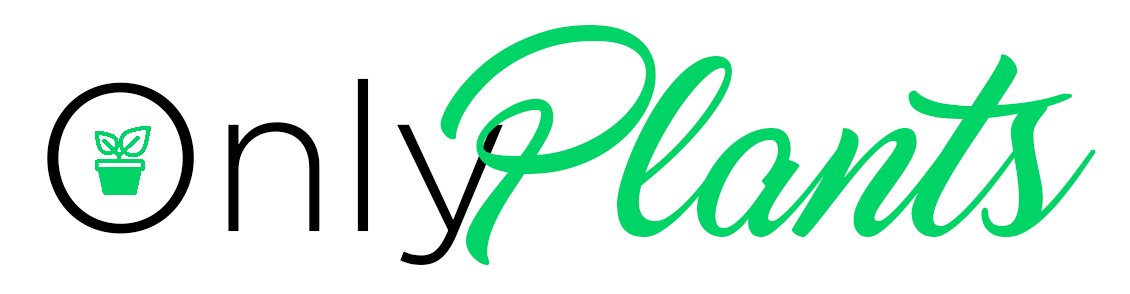
<style>
.page{position:relative;width:1130px;height:294px;background:#ffffff}
.page>*{position:absolute;margin:0}
.t1{font:183.3px "Marguerite";color:#00d466}
.t2{font:208.3px "Gotham-Light";color:#000000}
</style>
<div class="page">
<p class="t1" style="left:440px;top:25px;width:656px;height:240px">Plants</p>
<p class="t2" style="left:47px;top:78px;width:456px;height:187px">Only</p>
</div>
